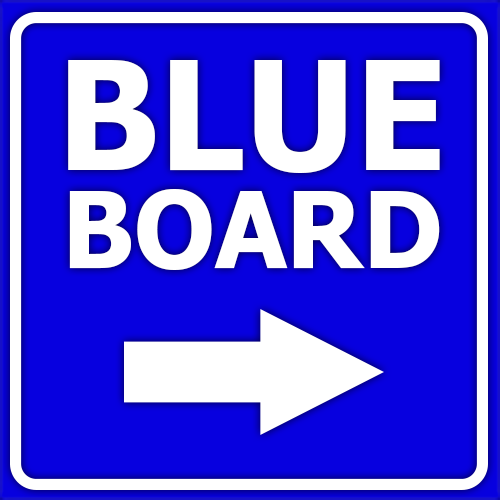
<style>
.page{position:relative;width:500px;height:500px;background:#0700df}
.page>*{position:absolute;margin:0}
.t1{font:105.7px/98px "Tahoma-Bold";color:#ffffff}
.t2{font:150.7px/98px "Tahoma-Bold";color:#ffffff}
</style>
<div class="page">
<p class="t1" style="left:68px;top:60px;width:372px;height:210px;text-align:center"><span class="t2">BLUE<br></span>BOARD</p>
</div>
